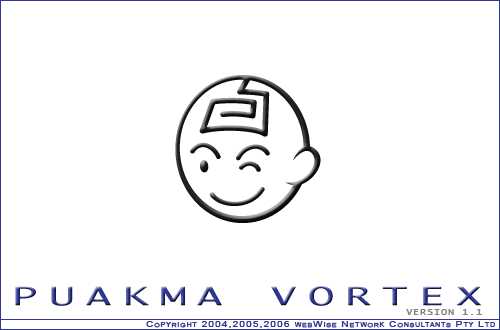
<style>
.page{position:relative;width:500px;height:330px;background:#ffffff}
.page>*{position:absolute;margin:0}
.t1{font:24px "Monaco";letter-spacing:0.23em;text-transform:uppercase;font-weight:bold;scale:1.8 1}
.t2{font:8px "Monaco";letter-spacing:0.1em;color:#828282;text-transform:uppercase;font-weight:bold;scale:1.2 1}
.t3{font:8px "ArialMT";letter-spacing:0.12em;color:#2f3893;font-variant:small-caps;font-weight:bold;scale:1.2 1}
</style>
<div class="page">
<p class="t1" style="left:15px;top:286px;width:467px;height:20px">Puakma Vortex</p>
<p class="t2" style="left:406px;top:309px;width:76px;height:6px">Version 1.1</p>
<p class="t3" style="left:146px;top:321px;width:349px;height:7px">Copyright 2004,2005,2006 webWise Network Consultants Pty Ltd</p>
</div>
